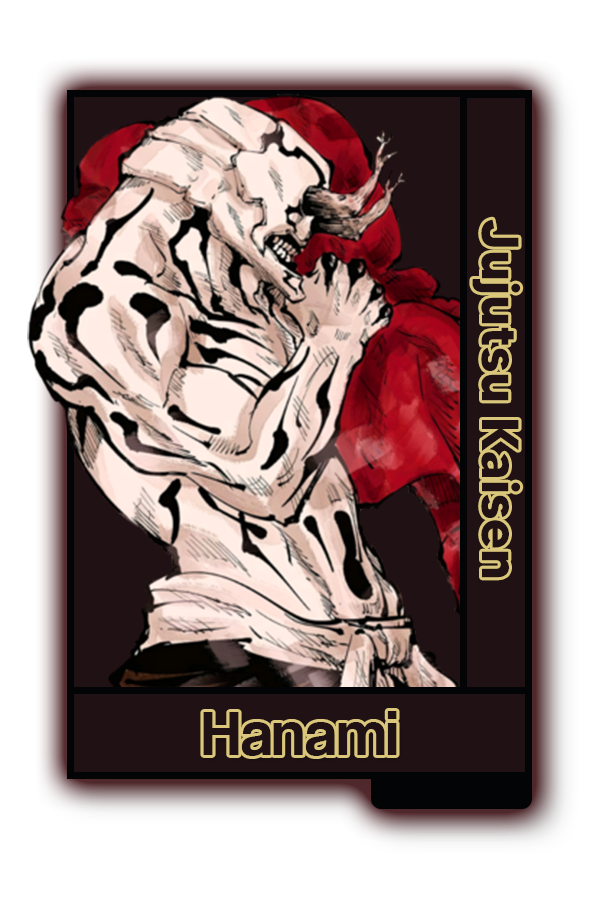
<style>
.page{position:relative;width:600px;height:900px;background:#ffffff}
.page>*{position:absolute;margin:0}
.t1{font:52px "MADETOMMY-Bold";color:#1e1214}
.t2{font:65.2px "CoolveticaRg-Regular";color:#1e1214}
</style>
<div class="page">
<p class="t1" style="left:472px;top:219px;width:49px;height:359px;rotate:90deg">Jujutsu Kaisen</p>
<p class="t2" style="left:203px;top:711px;width:194px;height:45px">Hanami</p>
</div>
